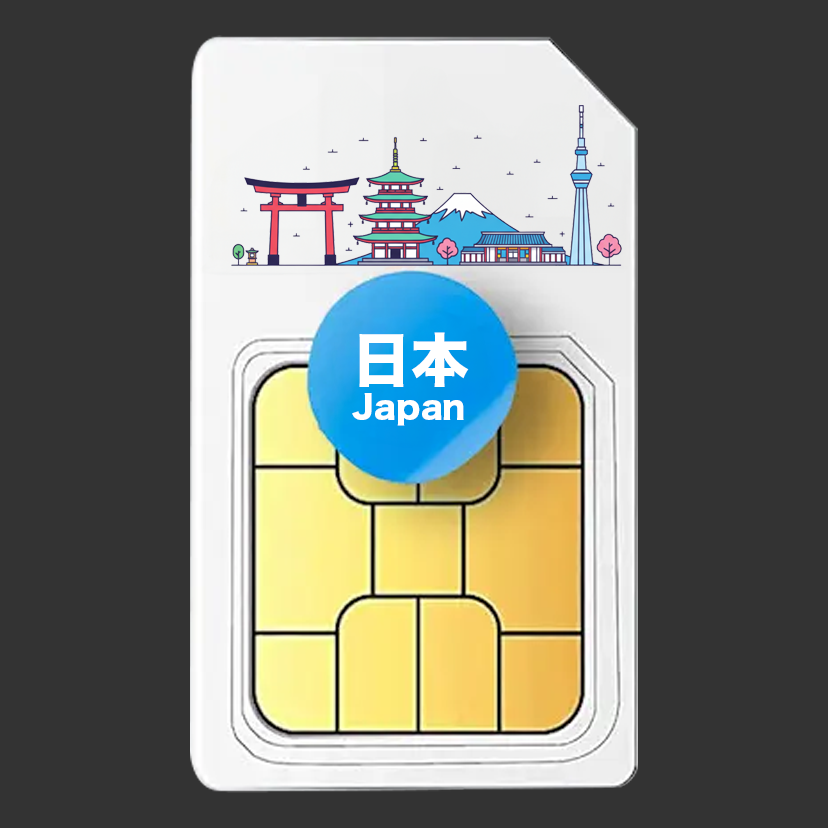
<style>
.page{position:relative;width:828px;height:828px;background:#333333}
.page>*{position:absolute;margin:0}
.t1{font:58.6px "HiraKakuStd-W8";color:#ffffff}
.t2{font:31.4px "HiraKakuStd-W8";color:#ffffff}
</style>
<div class="page">
<p class="t1" style="left:359px;top:332px;width:110px;height:55px">日本</p>
<p class="t2" style="left:352px;top:393px;width:112px;height:33px">Japan</p>
</div>
